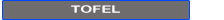
<style>
.page{position:relative;width:224px;height:20px;background:#6e6c6c}
.page>*{position:absolute;margin:0}
.t1{font:10.2px "ArialRoundedMTBold";color:#fcfcfc;scale:1.47 1}
</style>
<div class="page">
<p class="t1" style="left:71px;top:5px;width:49px;height:8px">TOFEL</p>
</div>
